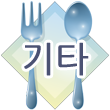
<style>
.page{position:relative;width:110px;height:110px;background:#ffffff}
.page>*{position:absolute;margin:0}
.t1{font:35px "NanumGothic";color:#4b5273;font-weight:bold}
</style>
<div class="page">
<p class="t1" style="left:24px;top:42px;width:65px;height:34px">기타</p>
</div>
